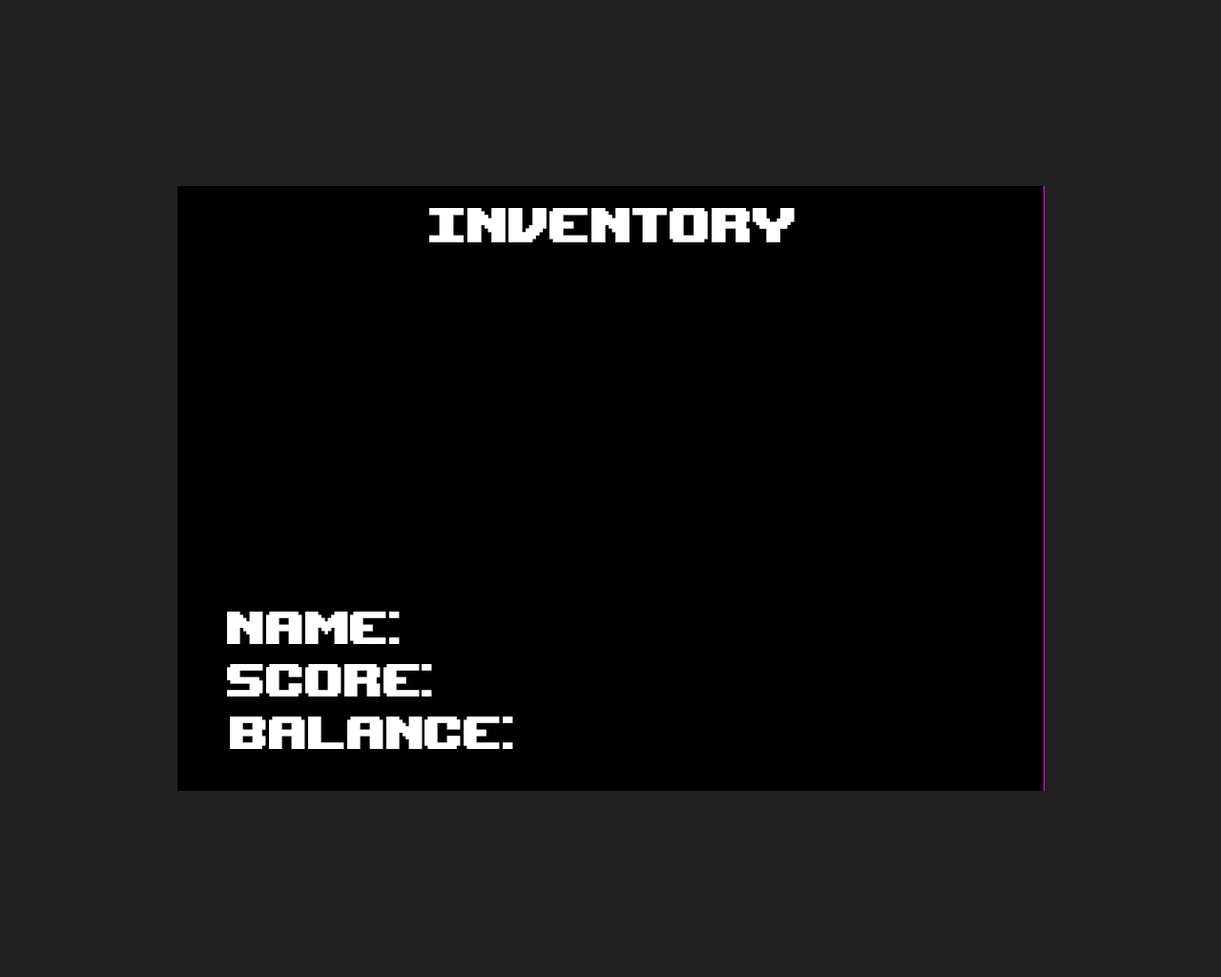
<style>
.page{position:relative;width:1221px;height:977px;background:#212121}
.page>*{position:absolute;margin:0}
.t1{font:68.7px "UpheavalTT-BRK-";color:#ffffff}
.t2{font:64.9px "UpheavalTT-BRK-";color:#ffffff}
</style>
<div class="page">
<p class="t1" style="left:429px;top:208px;width:366px;height:34px">inventory</p>
<p class="t2" style="left:227px;top:611px;width:173px;height:33px">NAME:</p>
<p class="t2" style="left:227px;top:664px;width:205px;height:32px">score:</p>
<p class="t2" style="left:230px;top:716px;width:283px;height:33px">BALANCE:</p>
</div>
